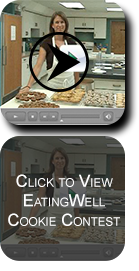
<style>
.page{position:relative;width:139px;height:271px}
.page>*{position:absolute;margin:0}
.t1{font:16.7px/19.4px "ArialMT";color:#ffffff;font-variant:small-caps}
</style>
<div class="page">
<p class="t1" style="left:8px;top:174px;width:112px;height:52px;text-align:center">Click to View EatingWell Cookie Contest</p>
</div>
